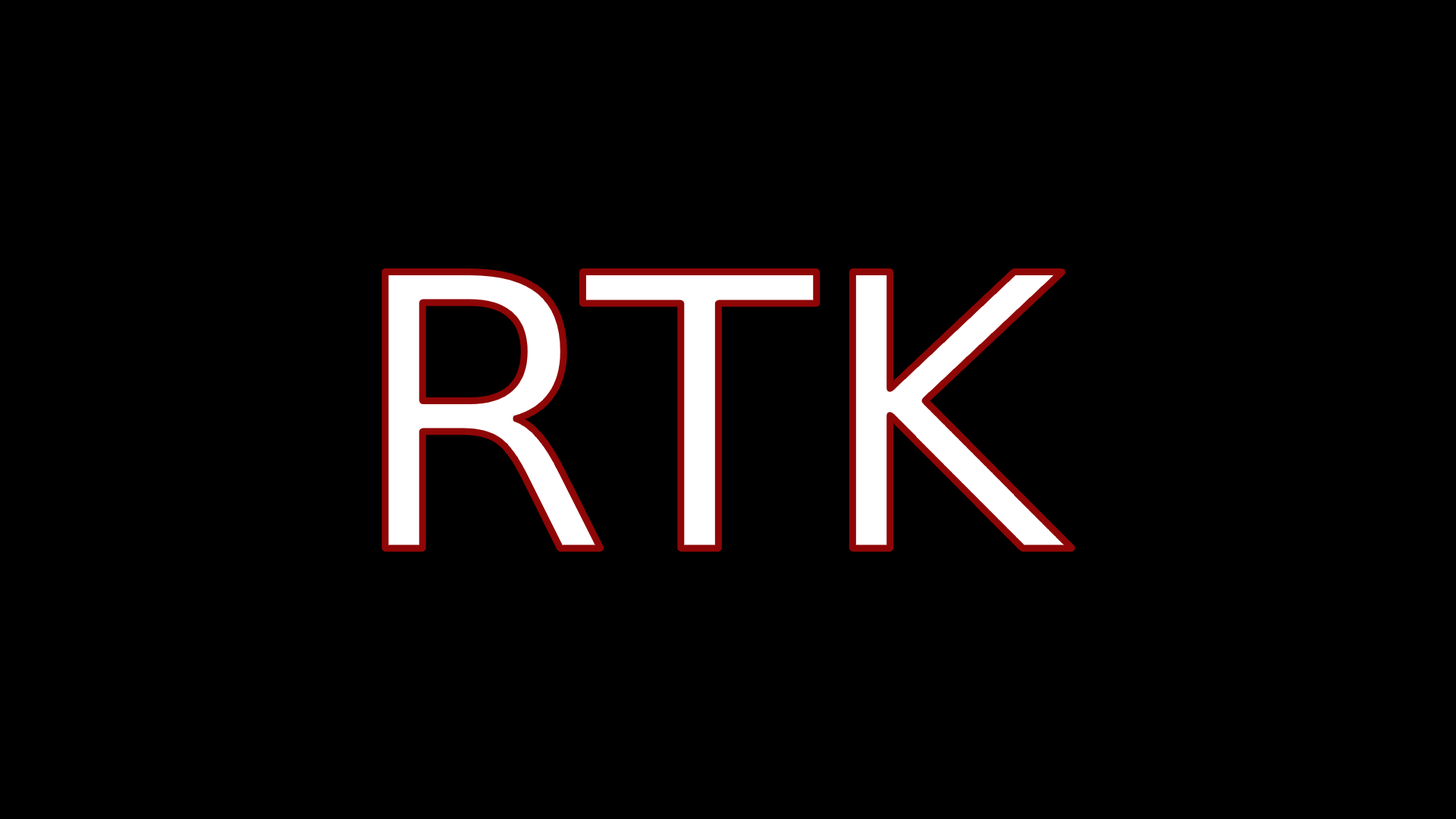
<style>
.page{position:relative;width:1456px;height:819px;background:#000000}
.page>*{position:absolute;margin:0}
.t1{font:379.2px "DejaVuSans";color:#ffffff}
</style>
<div class="page">
<p class="t1" style="left:384px;top:271px;width:688px;height:277px">RTK</p>
</div>
